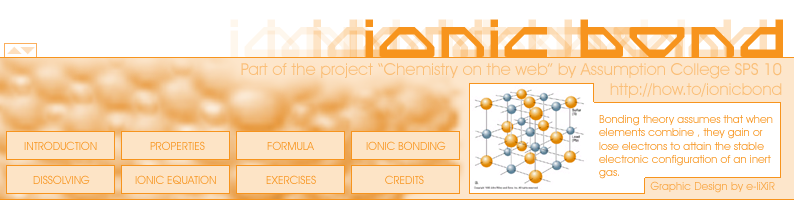
<style>
.page{position:relative;width:794px;height:200px;background:#ffffff}
.page>*{position:absolute;margin:0}
.t1{font:50px "SpyLord"}
.t2{font:50px "SpyLord";color:#f7941d}
.t3{font:16.7px "AvantGardeITCbyBT-Book";color:#fabf78}
.t4{font:11.1px "AvantGardeITCbyBT-Book";color:#f7941d}
.t5{font:11.1px "AvantGardeITCbyBT-Book"}
.t6{font:11.1px "AvantGardeITCbyBT-Book";color:#f8a440}
</style>
<div class="page">
<p class="t1" style="left:313px;top:19px;width:418px;height:38px">IONIC bond</p>
<p class="t1" style="left:349px;top:19px;width:418px;height:38px">IONIC bond</p>
<p class="t2" style="left:365px;top:19px;width:418px;height:38px">IONIC bond</p>
<p class="t3" style="left:241px;top:63px;width:541px;height:35px;text-align:right">Part of the project “Chemistry on the web” by Assumption College SPS 10<br>http://how.to/ionicbond</p>
<p class="t4" style="left:599px;top:115px;width:174px;height:64px">Bonding theory assumes that when<br>elements combine , they gain or <br>lose electrons to attain the stable <br>electronic configuration of an inert<br>gas.</p>
<p class="t4" style="left:24px;top:141px;width:73px;height:9px">INTRODUCTION</p>
<p class="t4" style="left:150px;top:141px;width:55px;height:9px">PROPERTIES</p>
<p class="t4" style="left:267px;top:141px;width:47px;height:9px">FORMULA</p>
<p class="t4" style="left:366px;top:141px;width:80px;height:9px">IONIC BONDING</p>
<p class="t5" style="left:33px;top:175px;width:57px;height:9px">DISSOLVING</p>
<p class="t4" style="left:135px;top:175px;width:81px;height:9px">IONIC EQUATION</p>
<p class="t5" style="left:266px;top:175px;width:50px;height:9px">EXERCISES</p>
<p class="t4" style="left:385px;top:175px;width:39px;height:9px">CREDITS</p>
<p class="t6" style="left:650px;top:181px;width:125px;height:12px">Graphic Design by e-liXiR</p>
</div>
